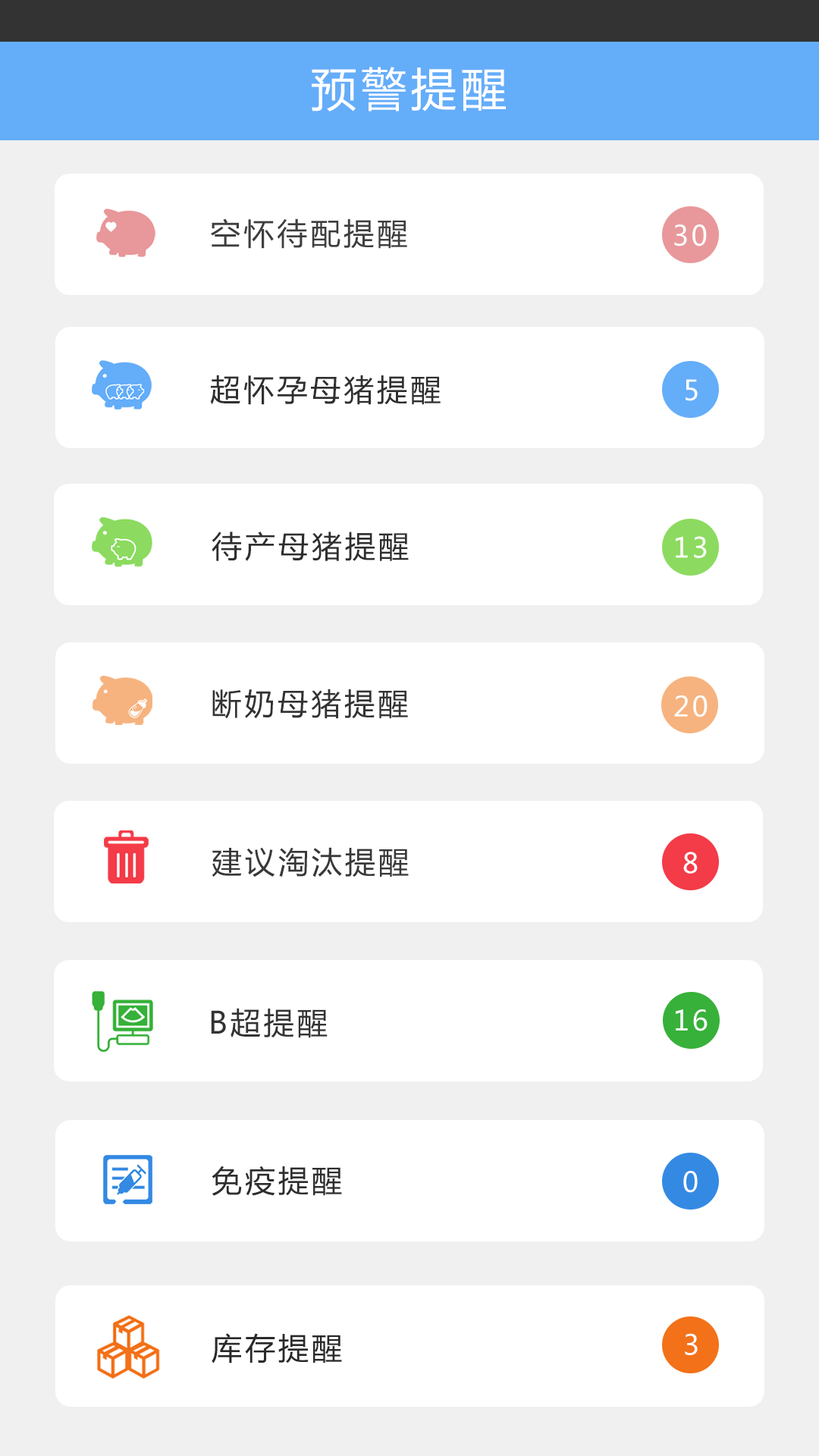
<style>
.page{position:relative;width:819px;height:1456px;background:#ffffff}
.page>*{position:absolute;margin:0}
.t1{font:45.5px "MicrosoftYaHei";letter-spacing:0.1em;color:#ffffff}
.t2{font:30.3px "MicrosoftYaHei";letter-spacing:0.1em;color:#3e3e3e}
.t3{font:27.3px "MicrosoftYaHei";letter-spacing:0.1em;color:#ffffff}
.t4{font:30.3px "MicrosoftYaHei";letter-spacing:0.1em;color:#2f2f2f}
.t5{font:30.3px "MicrosoftYaHei";letter-spacing:0.1em;color:#2e2e2e}
.t6{font:30.3px "MicrosoftYaHei";letter-spacing:0.1em;color:#333333}
.t7{font:30.3px "MicrosoftYaHei";letter-spacing:0.1em;color:#383838}
.t8{font:27.3px "MicrosoftYaHei";letter-spacing:0.1em;color:#fffefe}
.t9{font:30.3px "MicrosoftYaHei";letter-spacing:0.1em;color:#292929}
</style>
<div class="page">
<p class="t1" style="left:312px;top:67px;width:194px;height:44px">预警提醒</p>
<p class="t2" style="left:211px;top:218px;width:196px;height:31px">空怀待配提醒</p>
<p class="t3" style="left:674px;top:224px;width:33px;height:22px">30</p>
<p class="t4" style="left:210px;top:375px;width:231px;height:30px">超怀孕母猪提醒</p>
<p class="t3" style="left:686px;top:379px;width:12px;height:22px">5</p>
<p class="t5" style="left:212px;top:532px;width:197px;height:29px">待产母猪提醒</p>
<p class="t3" style="left:676px;top:536px;width:31px;height:22px">13</p>
<p class="t6" style="left:212px;top:689px;width:196px;height:30px">断奶母猪提醒</p>
<p class="t3" style="left:674px;top:695px;width:34px;height:22px">20</p>
<p class="t7" style="left:212px;top:847px;width:197px;height:30px">建议淘汰提醒</p>
<p class="t3" style="left:683px;top:852px;width:15px;height:22px">8</p>
<p class="t6" style="left:211px;top:1008px;width:117px;height:30px">B超提醒</p>
<p class="t3" style="left:676px;top:1009px;width:32px;height:22px">16</p>
<p class="t5" style="left:212px;top:1166px;width:130px;height:30px">免疫提醒</p>
<p class="t8" style="left:683px;top:1171px;width:15px;height:22px">0</p>
<p class="t9" style="left:212px;top:1333px;width:130px;height:30px">库存提醒</p>
<p class="t3" style="left:685px;top:1333px;width:13px;height:22px">3</p>
</div>
